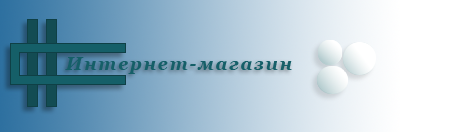
<style>
.page{position:relative;width:468px;height:132px}
.page>*{position:absolute;margin:0}
.t1{font:18px "Georgia-BoldItalic";letter-spacing:0.099em;color:#155f68}
</style>
<div class="page">
<p class="t1" style="left:65px;top:57px;width:227px;height:17px">Интернет-магазин</p>
</div>
